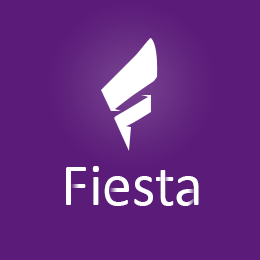
<style>
.page{position:relative;width:260px;height:260px;background:#5b1c79}
.page>*{position:absolute;margin:0}
.t1{font:60px "Calibri";color:#ffffff}
</style>
<div class="page">
<p class="t1" style="left:66px;top:166px;width:133px;height:40px">Fiesta</p>
</div>
